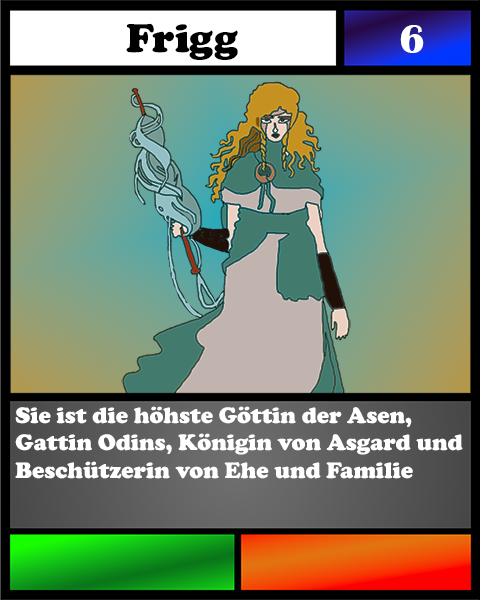
<style>
.page{position:relative;width:480px;height:600px}
.page>*{position:absolute;margin:0}
.t1{font:41.7px "CooperBlack";color:#000000}
.t2{font:41.7px "BritannicBold";color:#ffffff}
.t3{font:23.1px "CooperBlack";color:#ffffff}
</style>
<div class="page">
<p class="t1" style="left:126px;top:23px;width:112px;height:37px">Frigg</p>
<p class="t2" style="left:400px;top:25px;width:24px;height:28px">6</p>
<p class="t3" style="left:15px;top:406px;width:448px;height:73px">Sie ist die höhste Göttin der Asen, Gattin Odins, Königin von Asgard und Beschützerin von Ehe und Familie</p>
</div>
